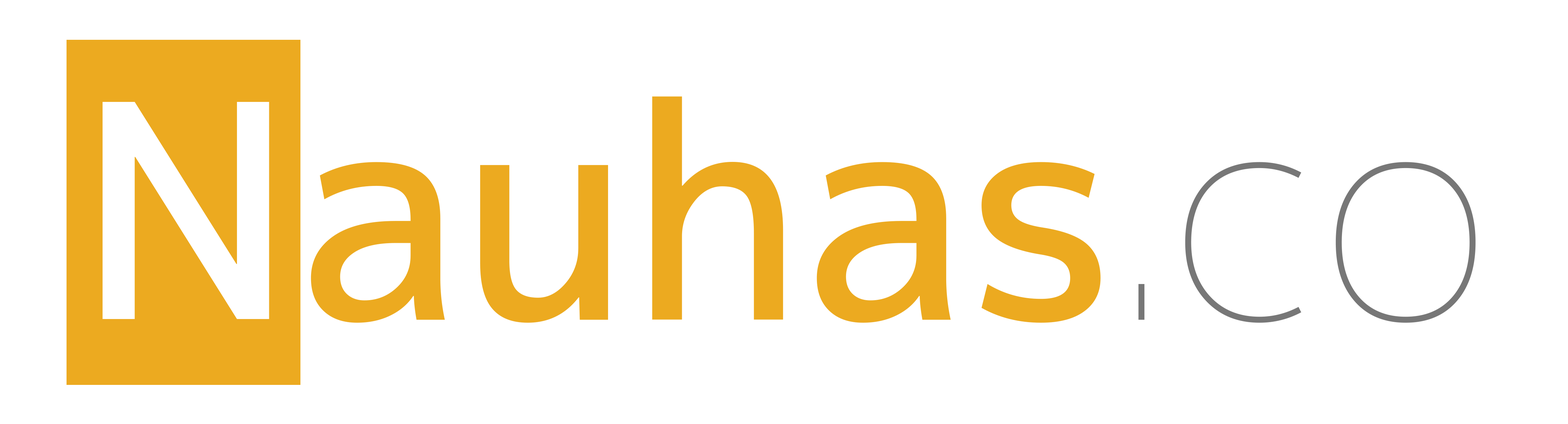
<style>
.page{position:relative;width:1568px;height:424px;background:#ffffff}
.page>*{position:absolute;margin:0}
.t1{font:297.2px "mplus-2p-medium";color:#ecaa20}
.t2{font:297.2px "mplus-2p-thin";color:#777777}
</style>
<div class="page">
<p class="t1" style="left:311px;top:96px;width:790px;height:227px">auhas</p>
<p class="t2" style="left:1138px;top:162px;width:338px;height:161px">.co</p>
</div>
